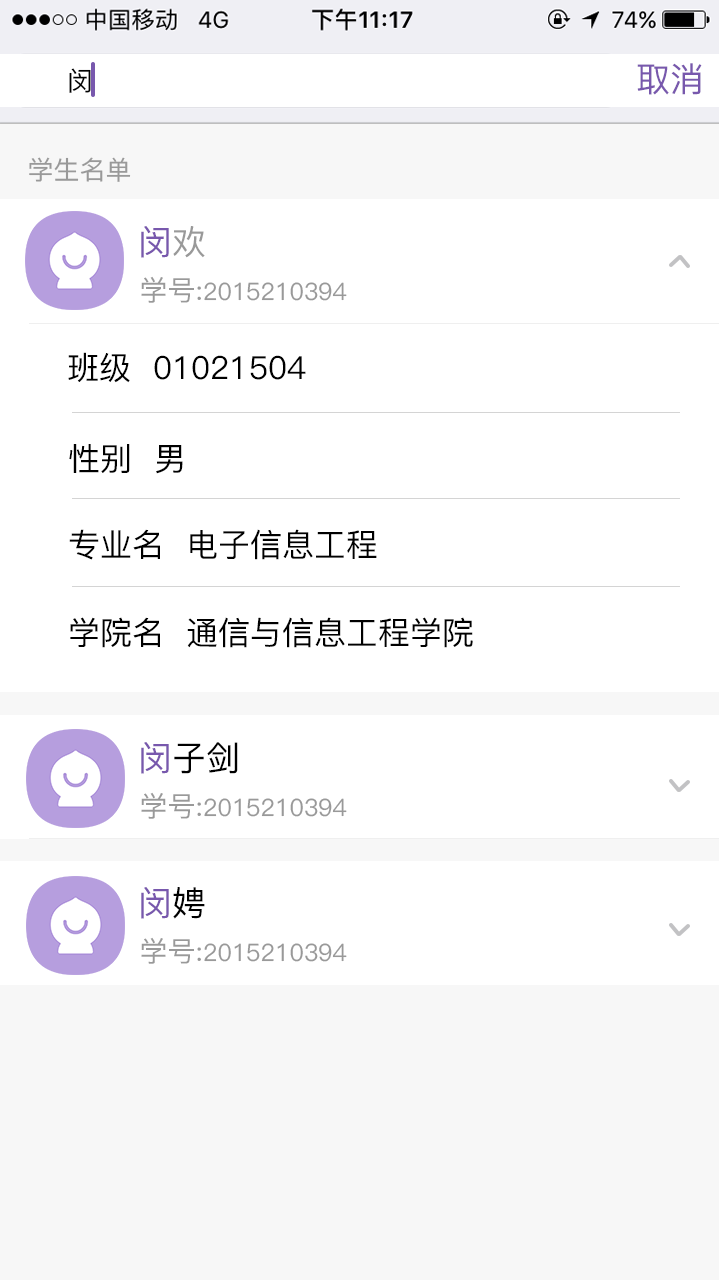
<style>
.page{position:relative;width:719px;height:1280px;background:#ffffff}
.page>*{position:absolute;margin:0}
.t1{font:34px "PingFangSC-Medium";color:#7858ad}
.t2{font:26px "PingFangSC-Medium";color:#000000}
.t3{font:26px "PingFangSC-Medium";color:#999999}
.t4{font:34px "PingFangSC-Medium";color:#999999}
.t5{font:24px "PingFangSC-Medium";color:#999999}
.t6{font:28px "PingFangSC-Medium";color:#999999}
.t7{font:32px "PingFangSC-Medium";color:#000000}
.t8{font:34px "PingFangSC-Medium";color:#000000}
</style>
<div class="page">
<p class="t1" style="left:637px;top:63px;width:65px;height:32px">取消</p>
<p class="t2" style="left:69px;top:68px;width:22px;height:25px">闵</p>
<p class="t3" style="left:29px;top:157px;width:102px;height:25px">学生名单</p>
<p class="t1" style="left:141px;top:226px;width:64px;height:32px">闵<span class="t4">欢</span></p>
<p class="t5" style="left:141px;top:276px;width:206px;height:27px"><span class="t6">学号:</span>2015210394</p>
<p class="t7" style="left:68px;top:352px;width:238px;height:31px">班级  01021504</p>
<p class="t7" style="left:69px;top:444px;width:114px;height:30px">性别  男</p>
<p class="t7" style="left:69px;top:529px;width:308px;height:31px">专业名  电子信息工程</p>
<p class="t7" style="left:70px;top:617px;width:403px;height:31px">学院名  通信与信息工程学院</p>
<p class="t8" style="left:141px;top:742px;width:97px;height:32px"><span class="t1">闵</span>子剑</p>
<p class="t5" style="left:141px;top:792px;width:206px;height:27px"><span class="t6">学号:</span>2015210394</p>
<p class="t1" style="left:141px;top:887px;width:64px;height:32px">闵<span class="t8">娉</span></p>
<p class="t5" style="left:141px;top:937px;width:206px;height:27px"><span class="t6">学号:</span>2015210394</p>
</div>
